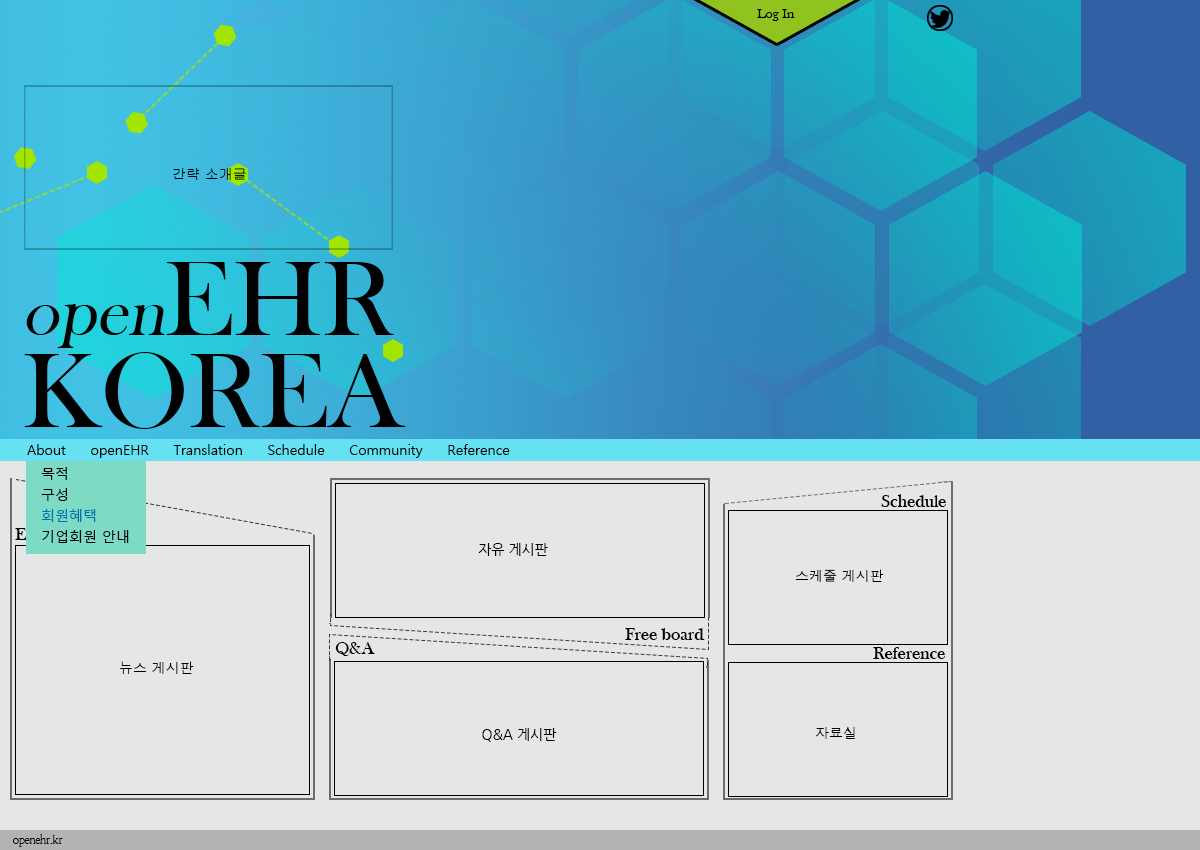
<style>
.page{position:relative;width:1200px;height:850px;background:#e6e6e6}
.page>*{position:absolute;margin:0}
.t1{font:14px "BaskOldFace";color:#000000}
.t2{font:14px "Gulim";color:#000000}
.t3{font:109.5px/92px "BaskOldFace";color:#000000}
.t4{font:70.7px/92px "BaskOldFace";color:#000000;font-style:italic}
.t5{font:14px "MalgunGothicRegular";color:#000000}
.t6{font:14px/21px "MalgunGothicRegular";color:#000000}
.t7{font:14px/21px "MalgunGothicRegular";color:#0075a9}
.t8{font:18px "BaskOldFace";color:#000000}
.t9{font:14px "NanumGothic";color:#000000}
.t10{font:14px "Dotum";color:#000000}
.t11{font:12px "NanumMyeongjo";letter-spacing:-0.06em;color:#000000}
</style>
<div class="page">
<p class="t1" style="left:757px;top:9px;width:38px;height:12px">Log In</p>
<p class="t2" style="left:173px;top:168px;width:73px;height:12px">간략 소개글</p>
<p class="t3" style="left:24px;top:262px;width:382px;height:167px"><span class="t4">open</span>EHR <br>KOREA</p>
<p class="t5" style="left:27px;top:444px;width:483px;height:14px">About     openEHR     Translation     Schedule     Community     Reference</p>
<p class="t6" style="left:41px;top:467px;width:88px;height:76px">목적<br>구성<br><span class="t7">회원혜택<br></span>기업회원 안내</p>
<p class="t8" style="left:881px;top:494px;width:65px;height:13px">Schedule</p>
<p class="t9" style="left:478px;top:543px;width:70px;height:13px">자유 게시판</p>
<p class="t10" style="left:795px;top:569px;width:89px;height:13px">스케줄 게시판</p>
<p class="t8" style="left:625px;top:628px;width:80px;height:12px">Free board</p>
<p class="t8" style="left:335px;top:642px;width:40px;height:14px">Q&amp;A</p>
<p class="t8" style="left:873px;top:647px;width:72px;height:12px">Reference</p>
<p class="t10" style="left:120px;top:661px;width:74px;height:13px">뉴스 게시판</p>
<p class="t10" style="left:815px;top:726px;width:40px;height:13px">자료실</p>
<p class="t9" style="left:482px;top:728px;width:75px;height:14px">Q&amp;A 게시판</p>
<p class="t11" style="left:12px;top:833px;width:51px;height:14px">openehr.kr</p>
</div>
